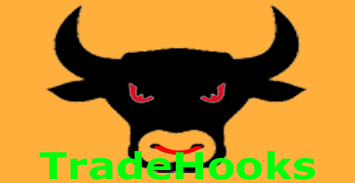
<style>
.page{position:relative;width:355px;height:183px;background:#ffaf3c}
.page>*{position:absolute;margin:0}
.t1{font:36.6px "Verdana-Bold";color:#00ff0c;scale:1.13 1}
</style>
<div class="page">
<p class="t1" style="left:39px;top:151px;width:276px;height:29px">TradeHooks</p>
</div>
